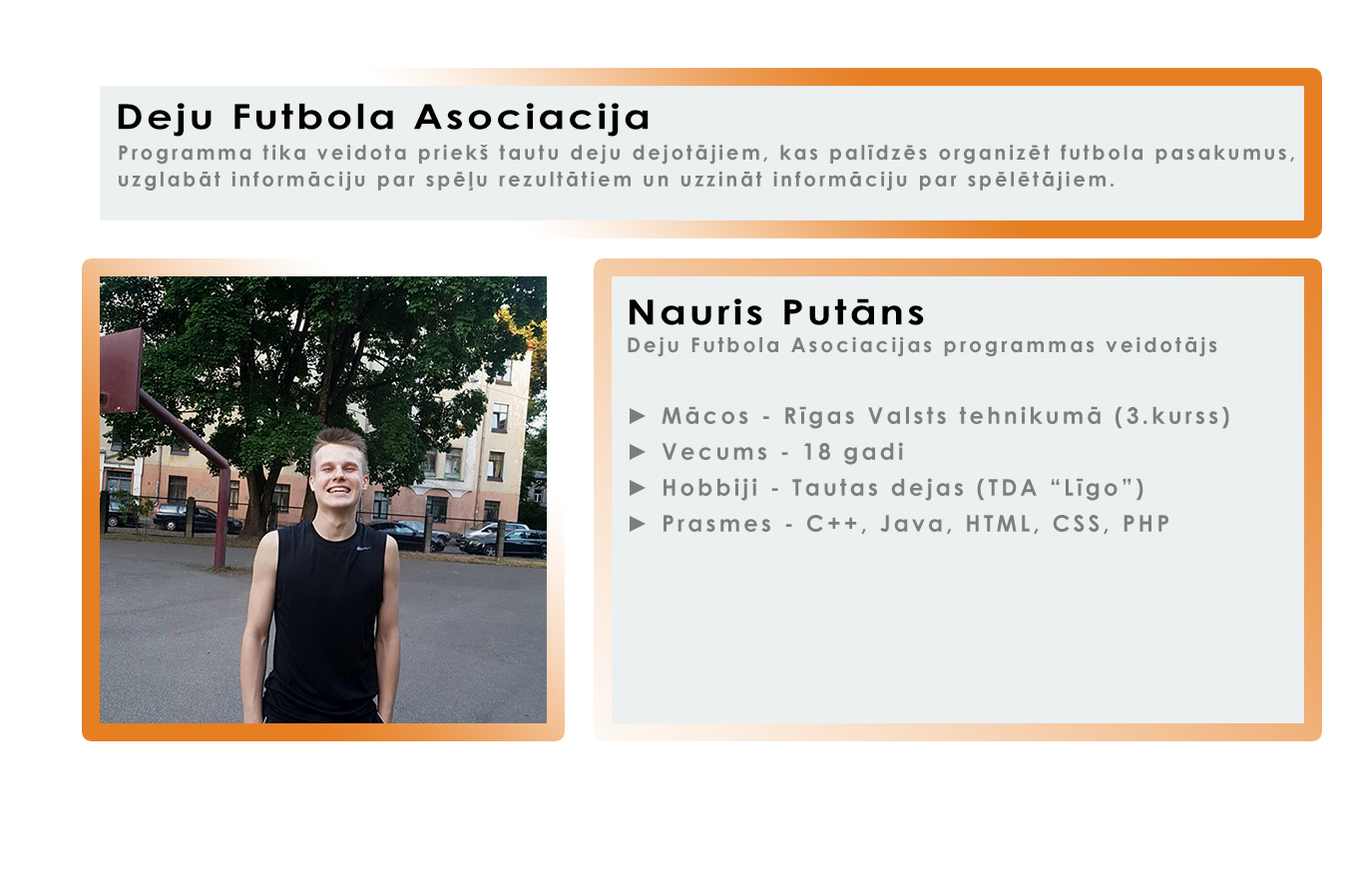
<style>
.page{position:relative;width:1353px;height:881px;background:#ffffff}
.page>*{position:absolute;margin:0}
.t1{font:34.8px "CenturyGothic-Bold";letter-spacing:0.08em;color:#000000;scale:1.16 1}
.t2{font:20px/26.9px "CenturyGothic-Bold";letter-spacing:0.14em;color:#7e7e7e}
.t3{font:23.1px/35.9px "CenturyGothic-Bold";letter-spacing:0.14em;color:#7e7e7e}
.t4{font:20.5px/35.9px "CenturyGothic-Bold";letter-spacing:0.14em;color:#7e7e7e}
</style>
<div class="page">
<p class="t1" style="left:118px;top:103px;width:531px;height:34px">Deju Futbola Asociacija</p>
<p class="t2" style="left:119px;top:145px;width:1175px;height:46px">Programma tika veidota priekš tautu deju dejotājiem, kas palīdzēs organizēt futbola pasakumus,<br>uzglabāt informāciju par spēļu rezultātiem un uzzināt informāciju par spēlētājiem.</p>
<p class="t1" style="left:630px;top:298px;width:294px;height:27px">Nauris Putāns</p>
<p class="t3" style="left:628px;top:336px;width:601px;height:199px"><span class="t4">Deju Futbola Asociacijas programmas veidotājs<br></span><br>► Mācos - Rīgas Valsts tehnikumā (3.kurss)<br>► Vecums - 18 gadi<br>► Hobbiji - Tautas dejas (TDA “Līgo”)<br>► Prasmes - C++, Java, HTML, CSS, PHP</p>
</div>
